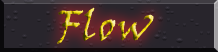
<style>
.page{position:relative;width:218px;height:52px;background:#28252c}
.page>*{position:absolute;margin:0}
.t1{font:43.3px "VinerHandITC"}
</style>
<div class="page">
<p class="t1" style="left:57px;top:7px;width:97px;height:37px">Flow</p>
</div>
